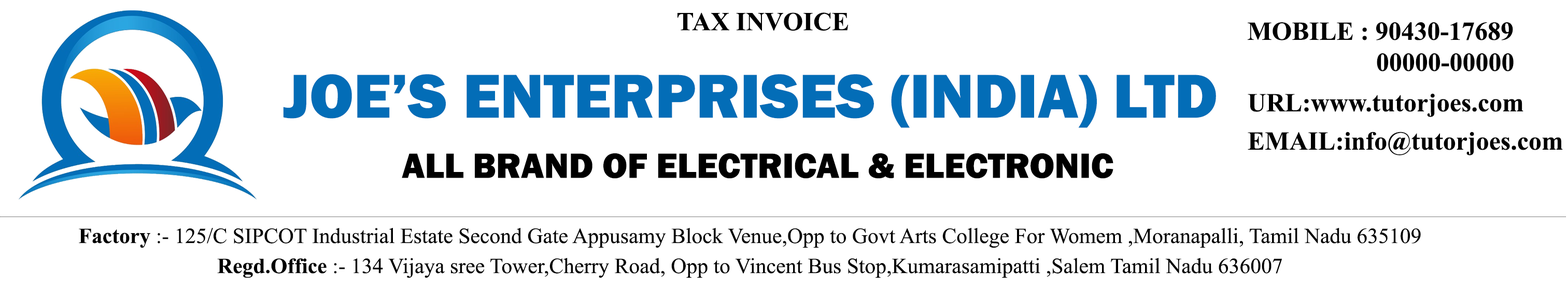
<style>
.page{position:relative;width:1568px;height:302px;background:#ffffff}
.page>*{position:absolute;margin:0}
.t1{font:25.9px "TimesNewRomanPS-BoldMT";color:#000000;text-transform:uppercase}
.t2{font:64.1px "FranklinGothic-Heavy";color:#036db7;text-transform:uppercase}
.t3{font:25.9px "TimesNewRomanPS-BoldMT";color:#000000}
.t4{font:36.4px "FranklinGothic-Heavy";color:#000000;text-transform:uppercase}
.t5{font:21.6px "TimesNewRomanPSMT";color:#000000}
.t6{font:21.6px "TimesNewRomanPS-BoldMT";color:#000000}
</style>
<div class="page">
<p class="t1" style="left:677px;top:12px;width:172px;height:19px">TAX INVOICE</p>
<p class="t1" style="left:1248px;top:22px;width:266px;height:50px;text-align:center">Mobile : 90430-17689<br>                    00000-00000</p>
<p class="t2" style="left:283px;top:74px;width:933px;height:54px">Joe’s Enterprises (INDIA) Ltd</p>
<p class="t3" style="left:1248px;top:93px;width:275px;height:24px"><span class="t1">URL:</span>www.tutorjoes.com</p>
<p class="t3" style="left:1248px;top:132px;width:315px;height:24px"><span class="t1">EMAIL:</span>info@tutorjoes.com</p>
<p class="t4" style="left:402px;top:153px;width:711px;height:26px">All brand of ELECTRICAL &amp; ELECTRONIC</p>
<p class="t5" style="left:79px;top:228px;width:1342px;height:20px"><span class="t6">Factory</span> :- 125/C SIPCOT Industrial Estate Second Gate Appusamy Block Venue,Opp to Govt Arts College For Womem ,Moranapalli, Tamil Nadu 635109</p>
<p class="t5" style="left:217px;top:258px;width:1065px;height:20px"><span class="t6">Regd.Office</span> :- 134 Vijaya sree Tower,Cherry Road, Opp to Vincent Bus Stop,Kumarasamipatti ,Salem Tamil Nadu 636007</p>
</div>
